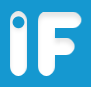
<style>
.page{position:relative;width:91px;height:87px;background:#1598d0}
.page>*{position:absolute;margin:0}
.t1{font:72px "AdobeHeitiStd-Regular";letter-spacing:0.075em;color:#ffffff}
</style>
<div class="page">
<p class="t1" style="left:17px;top:16px;width:55px;height:56px">IF</p>
</div>
